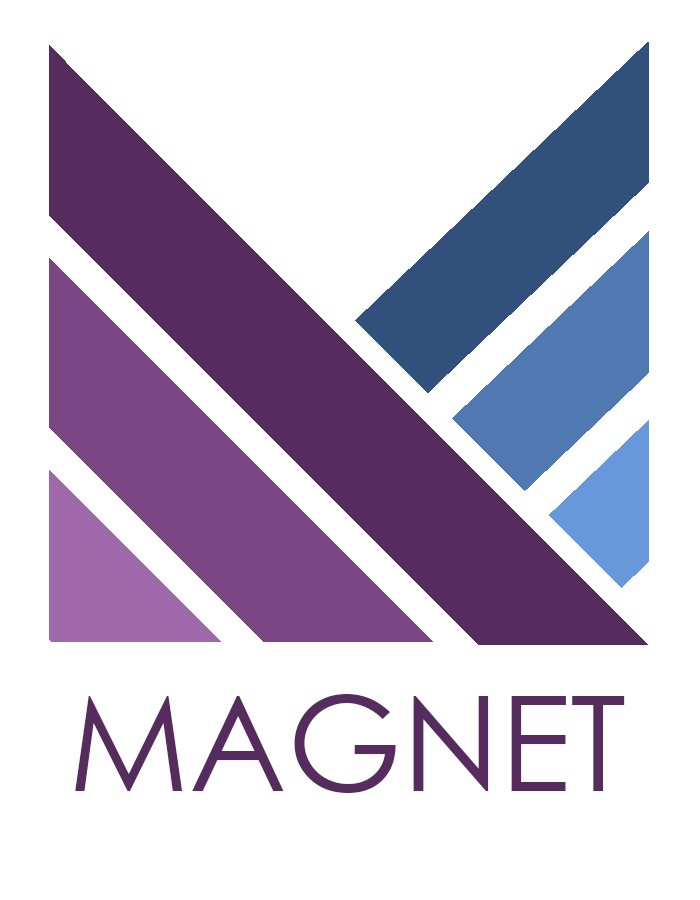
<style>
.page{position:relative;width:700px;height:900px;background:#ffffff}
.page>*{position:absolute;margin:0}
.t1{font:132px "CenturyGothic";color:#562c5e}
</style>
<div class="page">
<p class="t1" style="left:75px;top:694px;width:550px;height:99px">MAGNET</p>
</div>
